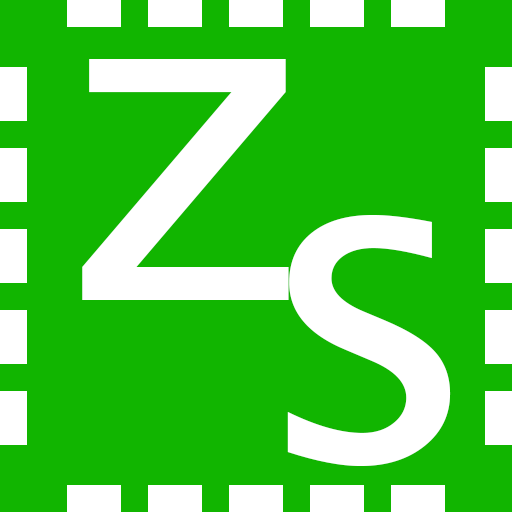
<style>
.page{position:relative;width:512px;height:512px;background:#11b500}
.page>*{position:absolute;margin:0}
.t1{font:455px "LucidaSansUnicode";color:#ffffff}
</style>
<div class="page">
<p class="t1" style="left:82px;top:59px;width:207px;height:241px">z</p>
<p class="t1" style="left:287px;top:215px;width:164px;height:251px">s</p>
</div>
